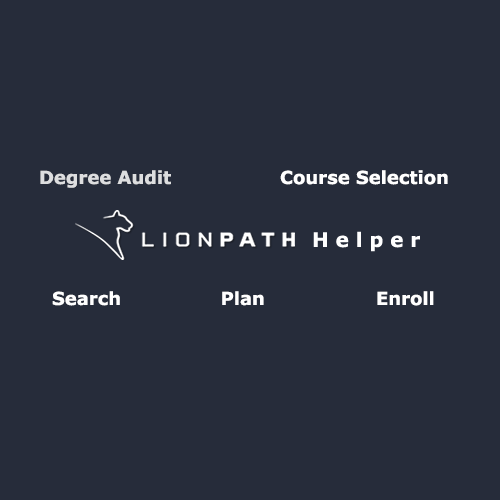
<style>
.page{position:relative;width:500px;height:500px;background:#262c3a}
.page>*{position:absolute;margin:0}
.t1{font:18px "Verdana-Bold";color:#dddedf}
.t2{font:18px "Verdana-Bold";color:#ffffff}
</style>
<div class="page">
<p class="t1" style="left:40px;top:170px;width:131px;height:18px">Degree Audit</p>
<p class="t2" style="left:280px;top:170px;width:168px;height:15px">Course Selection</p>
<p class="t2" style="left:52px;top:291px;width:382px;height:15px">Search       Plan    Enroll</p>
</div>
